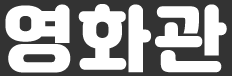
<style>
.page{position:relative;width:232px;height:76px;background:#ffffff}
.page>*{position:absolute;margin:0}
.t1{font:72px "Jalnan";letter-spacing:0.05em;color:#ffffff;text-transform:uppercase}
</style>
<div class="page">
<p class="t1" style="left:5px;top:4px;width:222px;height:69px">영화관</p>
</div>
